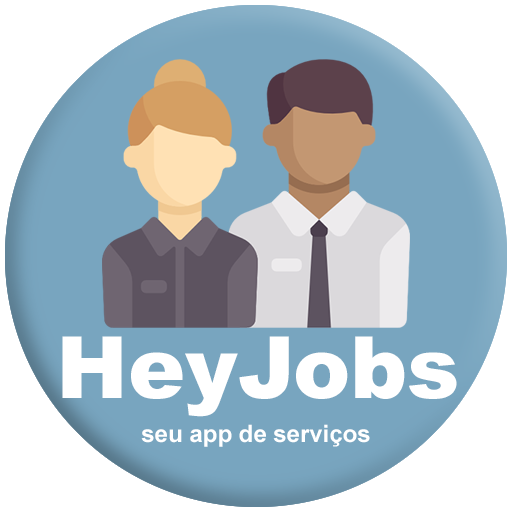
<style>
.page{position:relative;width:512px;height:512px;background:#78a5bf}
.page>*{position:absolute;margin:0}
.t1{font:86px "Arial-Black";color:#ffffff}
.t2{font:24px "Arial-BoldMT";color:#ffffff}
</style>
<div class="page">
<p class="t1" style="left:62px;top:336px;width:395px;height:81px">HeyJobs</p>
<p class="t2" style="left:141px;top:424px;width:229px;height:23px">seu app de serviços</p>
</div>
